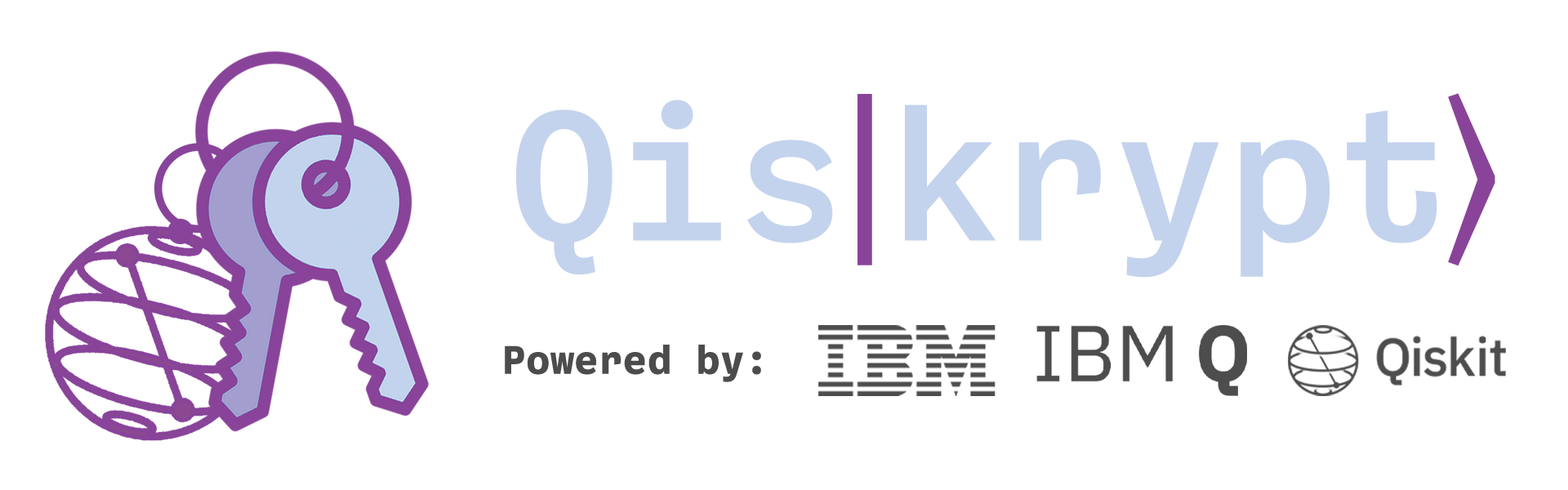
<style>
.page{position:relative;width:1568px;height:490px;background:#ffffff}
.page>*{position:absolute;margin:0}
.t1{font:188.2px "BallingerMono-Medium";color:#c3d3ed}
.t2{font:188.2px "Cambria";color:#89449a}
.t3{font:40.5px "BallingerMono-Bold";color:#4c4c4c}
</style>
<div class="page">
<p class="t1" style="left:516px;top:100px;width:921px;height:178px">Qis krypt</p>
<p class="t2" style="left:858px;top:94px;width:14px;height:171px">|</p>
<p class="t2" style="left:1448px;top:93px;width:47px;height:173px">⟩</p>
<p class="t3" style="left:505px;top:345px;width:256px;height:37px">Powered by:</p>
</div>
